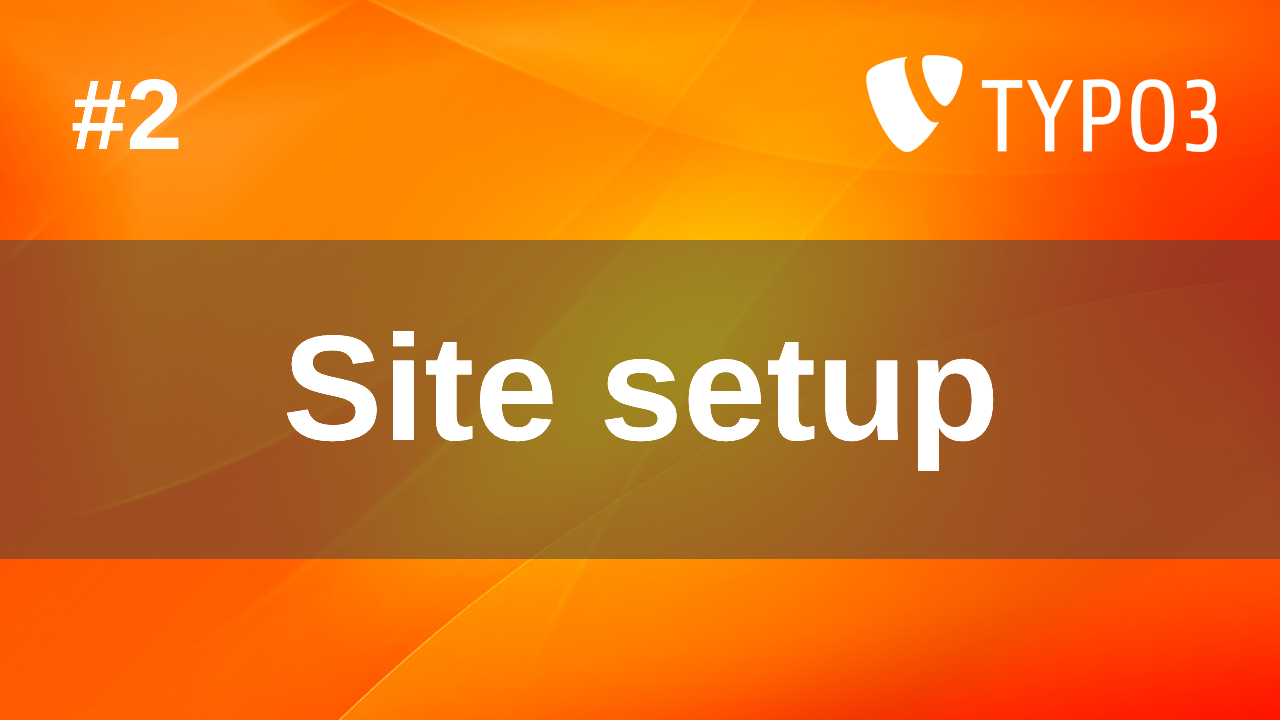
<style>
.page{position:relative;width:1280px;height:720px}
.page>*{position:absolute;margin:0}
.t1{font:100px "Arial-BoldMT";color:#ffffff}
.t2{font:150px "Arial-BoldMT";color:#ffffff}
</style>
<div class="page">
<p class="t1" style="left:72px;top:79px;width:107px;height:70px">#2</p>
<p class="t2" style="left:286px;top:331px;width:708px;height:140px">Site setup</p>
</div>
